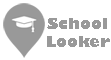
<style>
.page{position:relative;width:111px;height:60px;background:#ffffff}
.page>*{position:absolute;margin:0}
.t1{font:15.1px "GillSans-UltraBold";color:#999999}
</style>
<div class="page">
<p class="t1" style="left:47px;top:18px;width:63px;height:29px;text-align:center">School<br>Looker</p>
</div>
